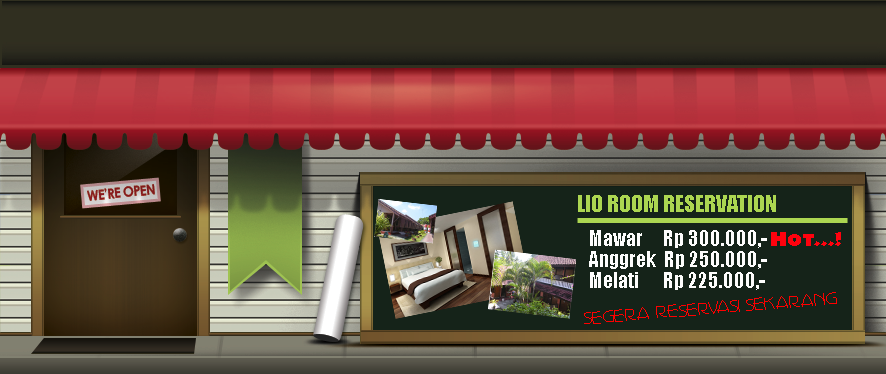
<style>
.page{position:relative;width:886px;height:374px}
.page>*{position:absolute;margin:0}
.t1{font:21.1px "Impact";color:#acd651}
.t2{font:20px/21.2px "Impact";color:#fdfdfc}
.t3{font:20px/21.2px "JungleFever";color:#ff020e}
.t4{font:20px "Perisphere";color:#fe0000}
</style>
<div class="page">
<p class="t1" style="left:578px;top:195px;width:198px;height:17px">LIO ROOM RESERVATION</p>
<p class="t2" style="left:589px;top:230px;width:252px;height:60px">Mawar     Rp 300.000,- <span class="t3">Hot...!<br></span>Anggrek  Rp 250.000,-<br>Melati      Rp 225.000,-</p>
<p class="t4" style="left:584px;top:292px;width:253px;height:32px;rotate:-5deg">SEGERA RESERVASI SEKARANG</p>
</div>
